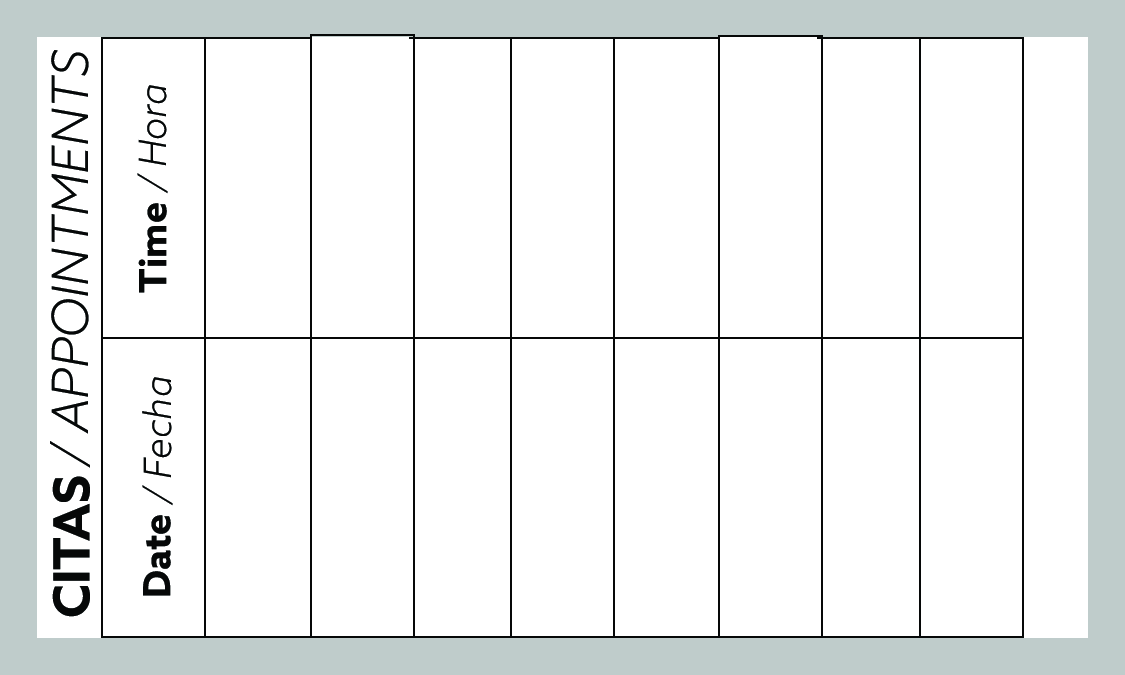
<style>
.page{position:relative;width:1125px;height:675px;background:#ffffff}
.page>*{position:absolute;margin:0}
.t1{font:50px "AzoSans-LightItalic";color:#060808}
.t2{font:37.5px "AzoSans-LightItalic";color:#060808}
.t3{font:37.5px "AzoSans-Bold";color:#060808}
.t4{font:50px "AzoSans-Bold";color:#060808}
</style>
<div class="page">
<p class="t1" style="left:50px;top:50px;width:40px;height:418px;rotate:-90deg">/ APPOINTMENTS</p>
<p class="t2" style="left:137px;top:85px;width:31px;height:109px;rotate:-90deg">/ Hora</p>
<p class="t3" style="left:138px;top:203px;width:29px;height:90px;rotate:-90deg">Time</p>
<p class="t2" style="left:142px;top:377px;width:31px;height:129px;rotate:-90deg">/ Fecha</p>
<p class="t4" style="left:52px;top:476px;width:38px;height:141px;rotate:-90deg">CITAS</p>
<p class="t3" style="left:143px;top:515px;width:28px;height:81px;rotate:-90deg">Date</p>
</div>
